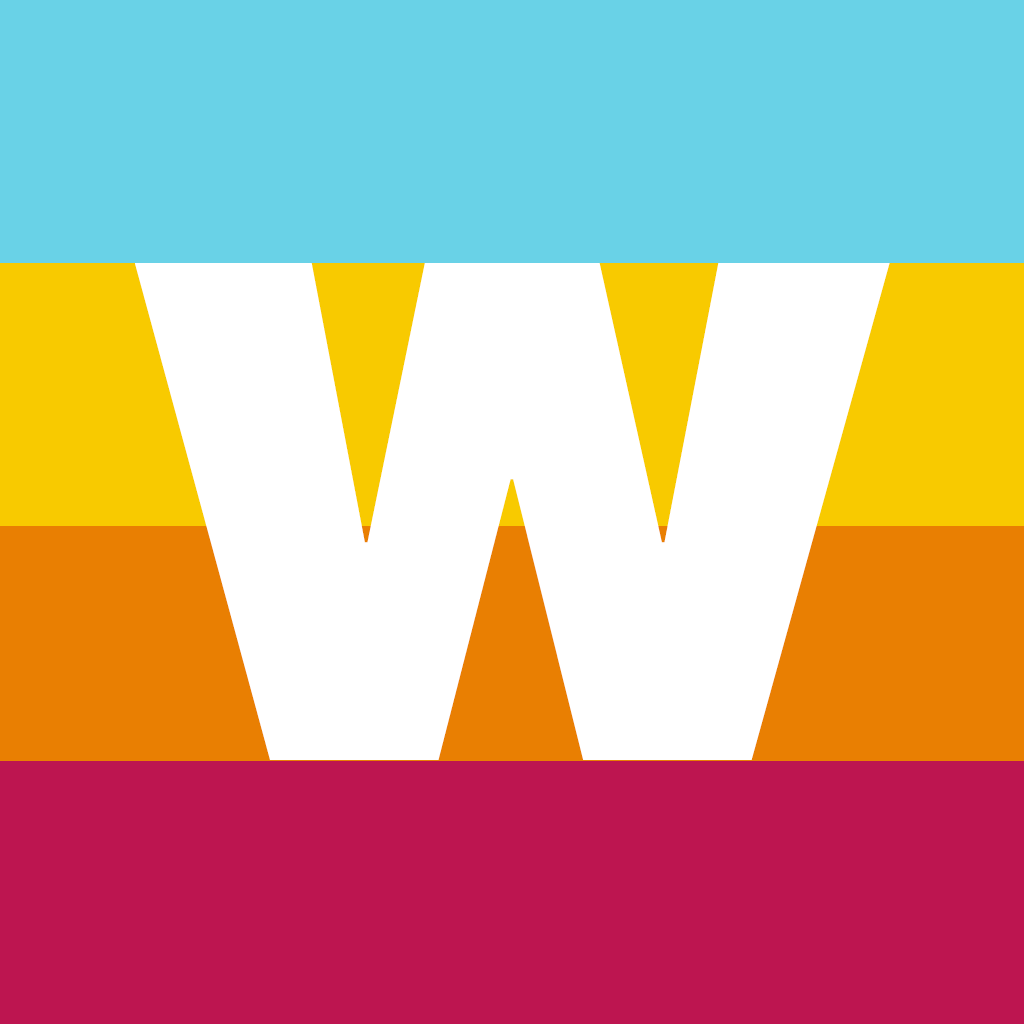
<style>
.page{position:relative;width:1024px;height:1024px;background:#bd1550}
.page>*{position:absolute;margin:0}
.t1{font:702px "AvenirNext-Heavy";letter-spacing:0.02em;color:#ffffff}
</style>
<div class="page">
<p class="t1" style="left:135px;top:263px;width:755px;height:497px">W</p>
</div>
